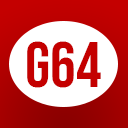
<style>
.page{position:relative;width:128px;height:128px;background:#ffffff}
.page>*{position:absolute;margin:0}
.t1{font:64px "BebasNeue-Regular";color:#c40000}
</style>
<div class="page">
<p class="t1" style="left:27px;top:41px;width:74px;height:47px">G64</p>
</div>
